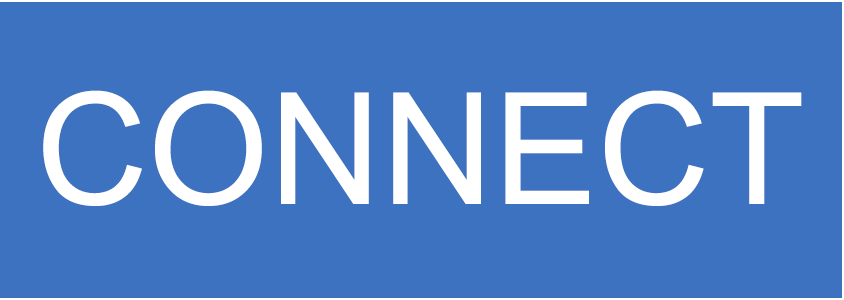
<style>
.page{position:relative;width:844px;height:300px;background:#3d72c1}
.page>*{position:absolute;margin:0}
.t1{font:155.5px "ArialUnicodeMS";color:#ffffff}
</style>
<div class="page">
<p class="t1" style="left:43px;top:90px;width:759px;height:116px">CONNECT</p>
</div>
